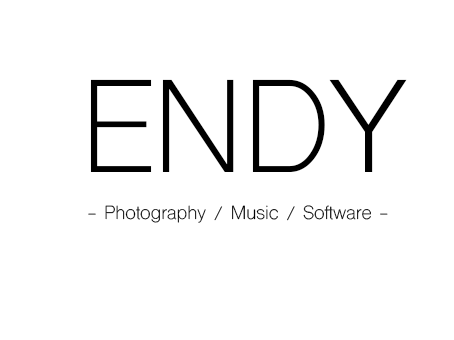
<style>
.page{position:relative;width:454px;height:340px;background:#ffffff}
.page>*{position:absolute;margin:0}
.t1{font:125px "ShreeDev0714";color:#000000}
.t2{font:18px "ShreeDev0714";color:#000000}
</style>
<div class="page">
<p class="t1" style="left:90px;top:79px;width:317px;height:93px">ENDY</p>
<p class="t2" style="left:88px;top:205px;width:300px;height:18px">- Photography / Music / Software -</p>
</div>
